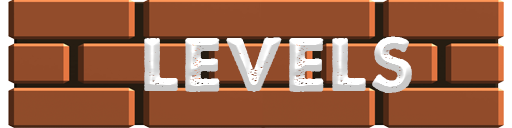
<style>
.page{position:relative;width:512px;height:128px;background:#924c2b}
.page>*{position:absolute;margin:0}
.t1{font:72px "ALoveofThunder";letter-spacing:0.04em}
</style>
<div class="page">
<p class="t1" style="left:144px;top:36px;width:268px;height:57px">LEVELS</p>
</div>
